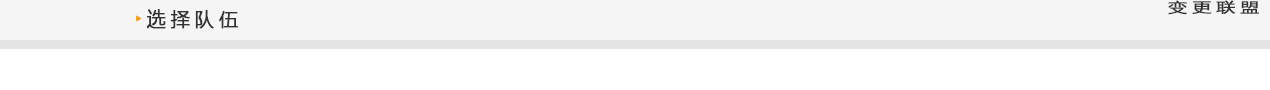
<style>
.page{position:relative;width:1270px;height:90px;background:#ffffff}
.page>*{position:absolute;margin:0}
.t1{font:13.7px "MicrosoftYaHei";letter-spacing:0.24em;color:#333333;font-weight:bold;scale:1.39 1}
.t2{font:19px "MicrosoftYaHei";letter-spacing:0.24em;color:#333333;font-weight:bold}
</style>
<div class="page">
<p class="t1" style="left:1168px;top:0px;width:91px;height:15px">变更联盟</p>
<p class="t2" style="left:146px;top:9px;width:92px;height:20px">选择队伍</p>
</div>
